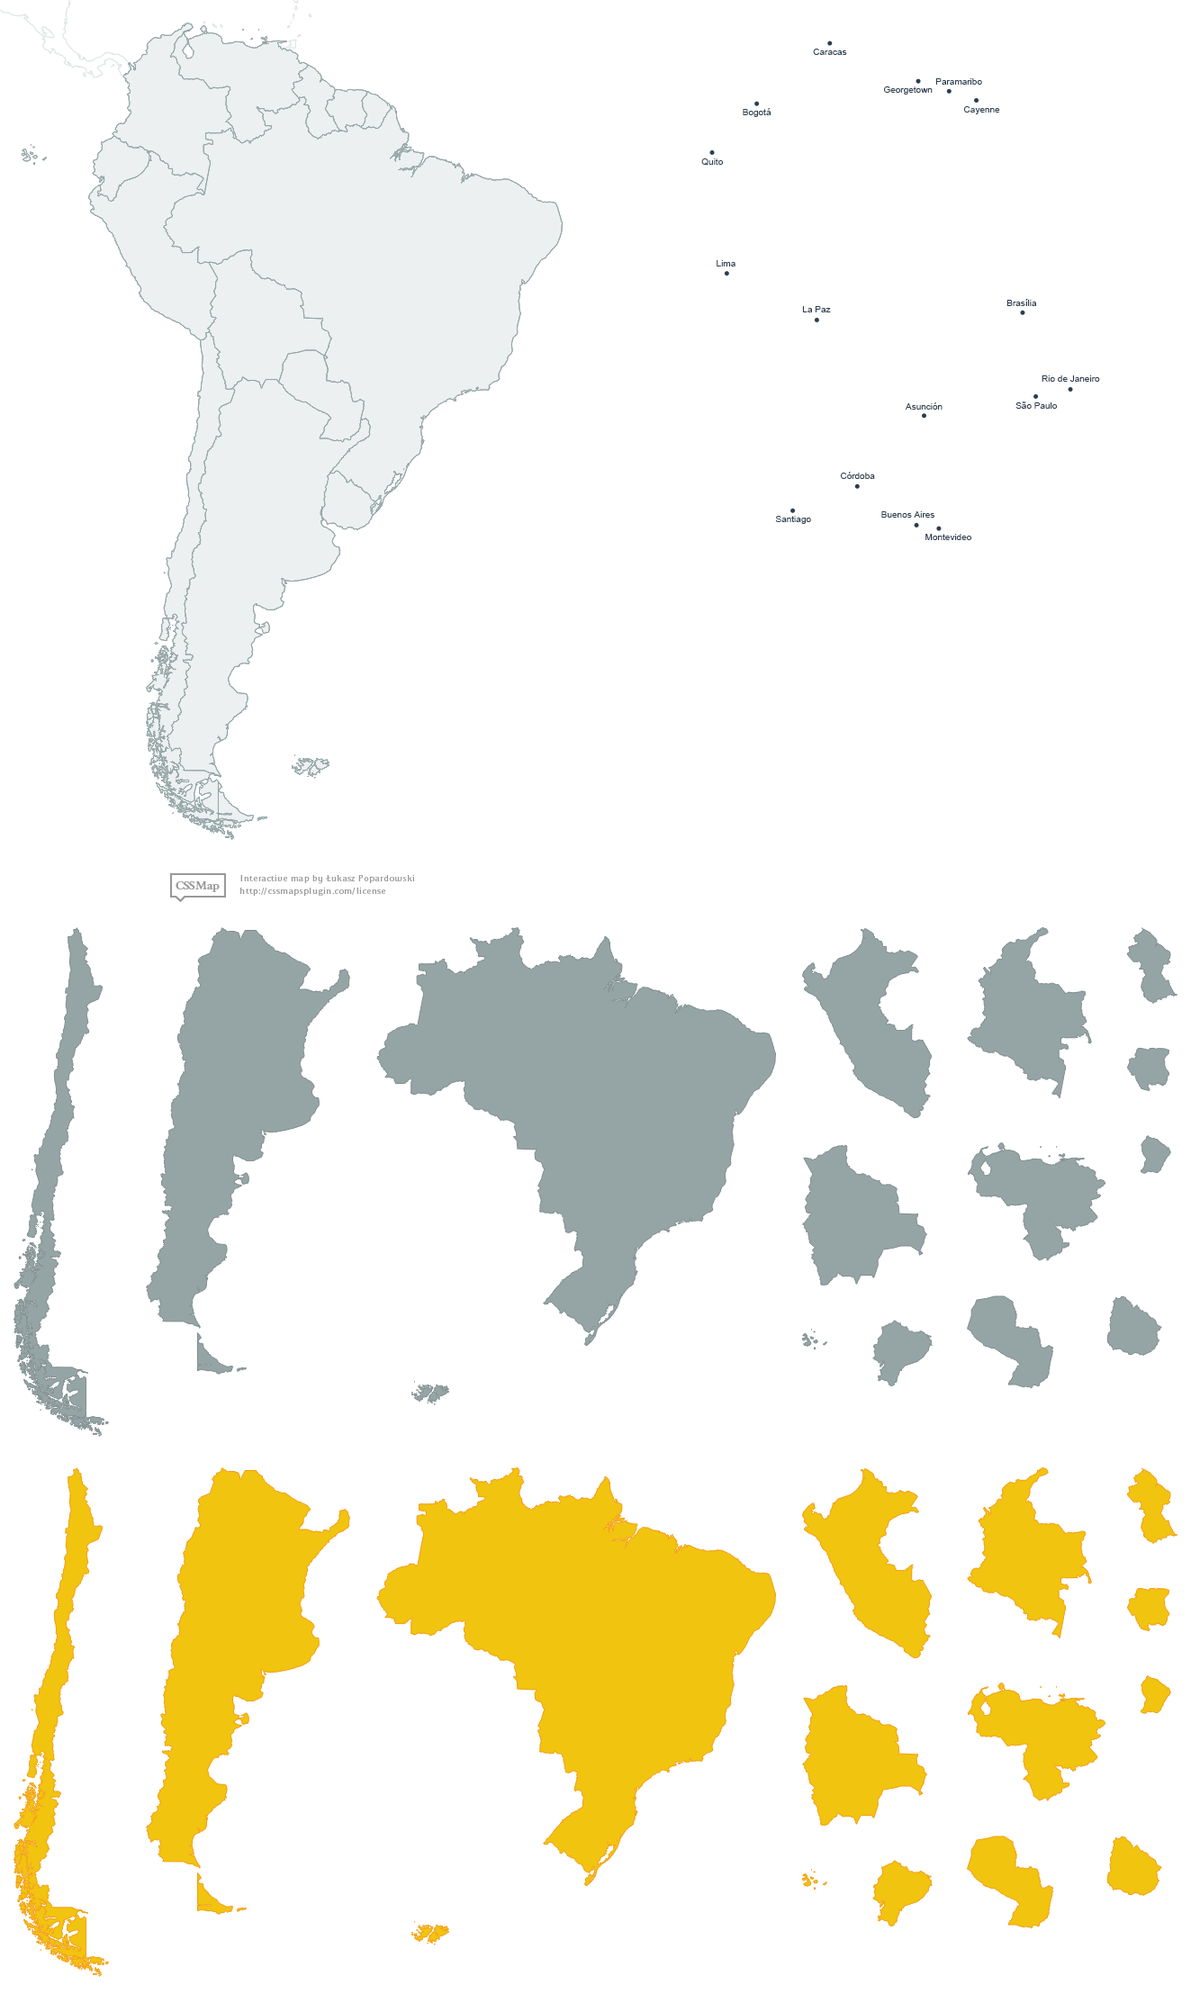
<style>
.page{position:relative;width:1191px;height:1994px;background:#ffffff}
.page>*{position:absolute;margin:0}
.t1{font:9px "ArialMT";color:#2c3e50}
</style>
<div class="page">
<p class="t1" style="left:813px;top:49px;width:34px;height:6px">Caracas</p>
<p class="t1" style="left:884px;top:86px;width:48px;height:9px">Georgetown</p>
<p class="t1" style="left:935px;top:78px;width:47px;height:7px">Paramaribo</p>
<p class="t1" style="left:743px;top:108px;width:28px;height:9px">Bogotá</p>
<p class="t1" style="left:963px;top:106px;width:37px;height:8px">Cayenne</p>
<p class="t1" style="left:701px;top:158px;width:22px;height:8px">Quito</p>
<p class="t1" style="left:716px;top:260px;width:19px;height:6px">Lima</p>
<p class="t1" style="left:1006px;top:299px;width:31px;height:7px">Brasília</p>
<p class="t1" style="left:802px;top:306px;width:29px;height:6px">La Paz</p>
<p class="t1" style="left:1041px;top:375px;width:59px;height:7px">Rio de Janeiro</p>
<p class="t1" style="left:1015px;top:401px;width:42px;height:8px">São Paulo</p>
<p class="t1" style="left:905px;top:402px;width:37px;height:8px">Asunción</p>
<p class="t1" style="left:840px;top:472px;width:35px;height:7px">Córdoba</p>
<p class="t1" style="left:775px;top:516px;width:36px;height:8px">Santiago</p>
<p class="t1" style="left:881px;top:511px;width:53px;height:7px">Buenos Aires</p>
<p class="t1" style="left:925px;top:534px;width:46px;height:6px">Montevideo</p>
</div>
